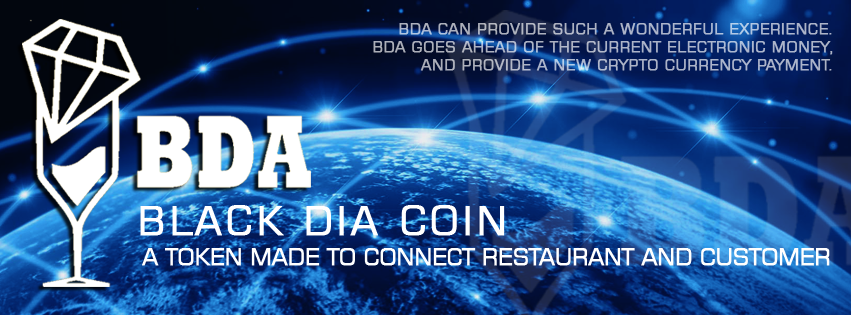
<style>
.page{position:relative;width:851px;height:315px}
.page>*{position:absolute;margin:0}
.t1{font:15px "Square721BT-Roman";letter-spacing:0.01em;color:#acb4c9;text-transform:uppercase;font-weight:bold}
.t2{font:39.4px "Square721BT-Roman";letter-spacing:0.07em;color:#ffffff;text-transform:uppercase;font-weight:bold}
.t3{font:23.4px "Square721BT-Roman";letter-spacing:-0.04em;color:#ffffff;text-transform:uppercase;font-weight:bold}
</style>
<div class="page">
<p class="t1" style="left:373px;top:23px;width:460px;height:48px;text-align:right">BDA can provide such a wonderful experience.<br>              BDA goes ahead of the current electronic money,<br>and provide a new crypto currency payment.</p>
<p class="t2" style="left:140px;top:205px;width:365px;height:31px">BLACK DIA COIN</p>
<p class="t3" style="left:142px;top:248px;width:688px;height:18px">A token made to connect restaurant and customer</p>
</div>
